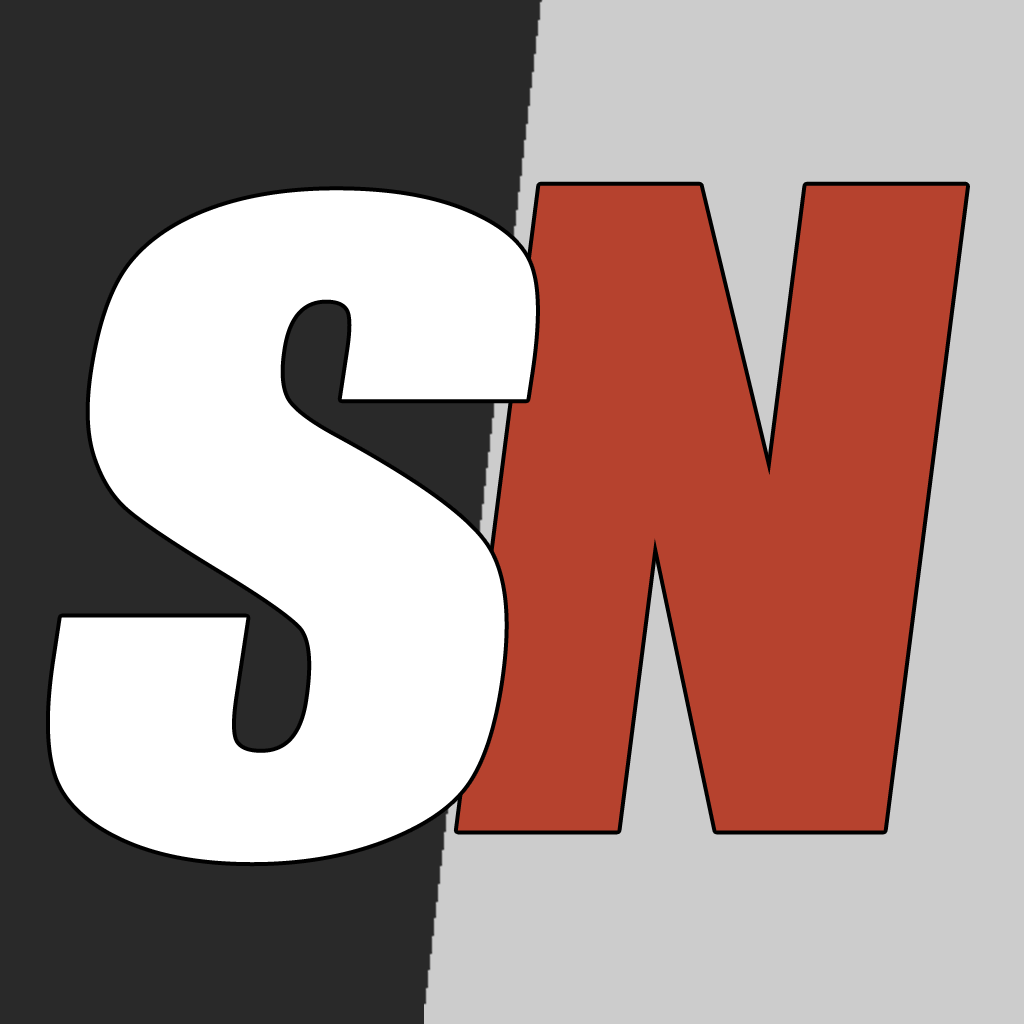
<style>
.page{position:relative;width:1024px;height:1024px;background:#cccccc}
.page>*{position:absolute;margin:0}
.t1{font:821.9px "Impact";color:#b6422e;scale:1.13 1}
.t2{font:824.6px "Impact";color:#ffffff;scale:1.17 1}
</style>
<div class="page">
<p class="t1" style="left:457px;top:185px;width:509px;height:646px">N</p>
<p class="t2" style="left:50px;top:190px;width:486px;height:673px">S</p>
</div>
